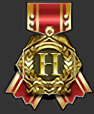
<style>
.page{position:relative;width:94px;height:114px;background:#333333}
.page>*{position:absolute;margin:0}
.t1{font:30px "RyuminPro-ExBold";font-weight:bold}
</style>
<div class="page">
<p class="t1" style="left:37px;top:53px;width:24px;height:23px">H</p>
</div>
